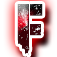
<style>
.page{position:relative;width:57px;height:57px;background:#ffffff}
.page>*{position:absolute;margin:0}
.t1{font:66.5px "UrbanJungleDEMO";scale:0.91 1}
</style>
<div class="page">
<p class="t1" style="left:17px;top:4px;width:26px;height:51px">f</p>
</div>
